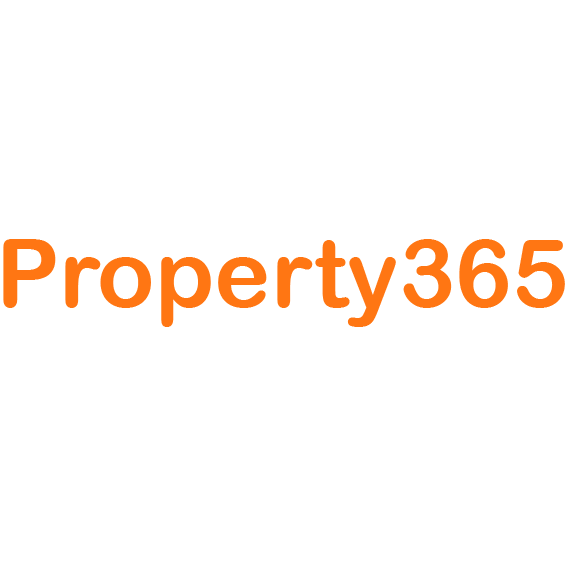
<style>
.page{position:relative;width:567px;height:567px;background:#ffffff}
.page>*{position:absolute;margin:0}
.t1{font:95px "ArialRoundedMTBold";color:#ff7613}
</style>
<div class="page">
<p class="t1" style="left:3px;top:239px;width:562px;height:88px">Property365</p>
</div>
